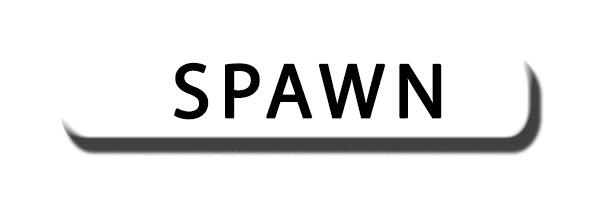
<style>
.page{position:relative;width:600px;height:200px;background:#ffffff}
.page>*{position:absolute;margin:0}
.t1{font:78px "MyriadPro-Regular";letter-spacing:0.1em;color:#000000;font-weight:bold}
</style>
<div class="page">
<p class="t1" style="left:174px;top:62px;width:268px;height:58px">SPAWN</p>
</div>
